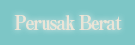
<style>
.page{position:relative;width:135px;height:45px;background:#7dc6c6}
.page>*{position:absolute;margin:0}
.t1{font:20px "RyuminPro-ExBold";letter-spacing:-0.08em;color:#f1e6d8;scale:0.9 1}
</style>
<div class="page">
<p class="t1" style="left:14px;top:15px;width:108px;height:16px">Perusak Berat</p>
</div>
